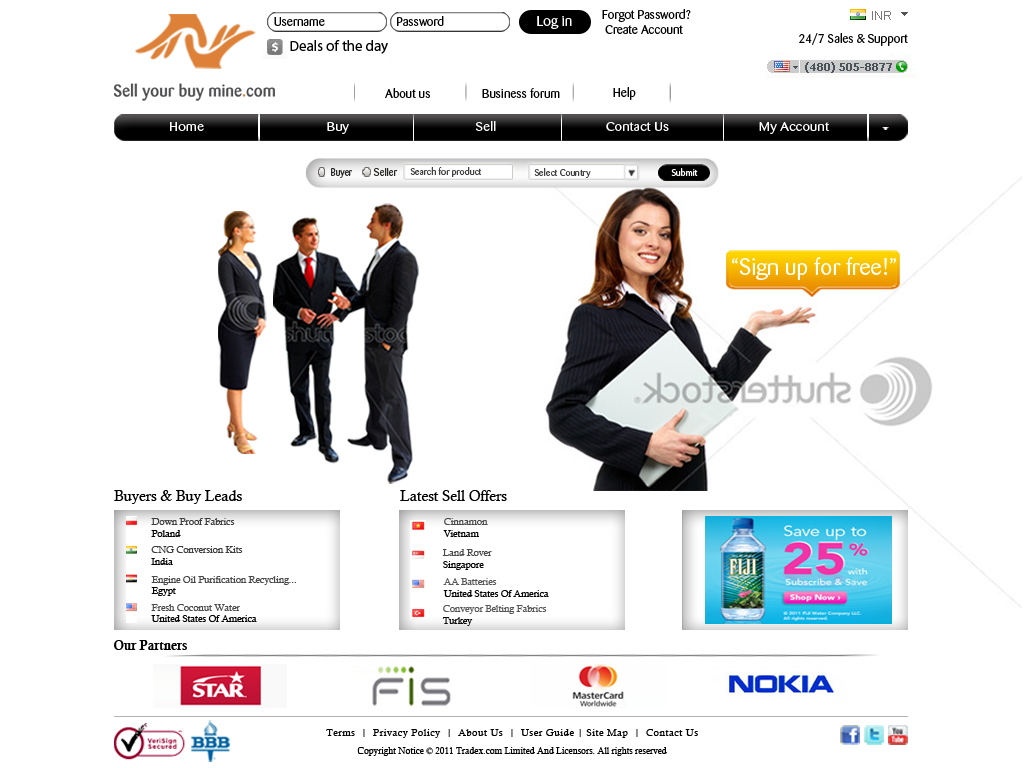
<style>
.page{position:relative;width:1024px;height:768px;background:#ffffff}
.page>*{position:absolute;margin:0}
.t1{font:12px "Barmeno-Regular";color:#000000;scale:1.05 1}
.t2{font:14px "Barmeno-Regular";color:#ffffff;scale:1.05 1}
.t3{font:14.9px "MyriadPro-Regular";color:#000000}
.t4{font:12px "Barmeno-Regular";color:#030303;scale:1.05 1}
.t5{font:12.1px "Barmeno-Regular";color:#ffffff;scale:1.2 1}
.t6{font:10.4px "Barmeno-Regular";color:#282826;scale:0.87 1}
.t7{font:10.4px "Barmeno-Regular";color:#282826}
.t8{font:9.5px "Barmeno-Regular";color:#414141}
.t9{font:10px "MyriadPro-Regular";color:#ffffff;scale:0.87 1}
.t10{font:23px "Barmeno-Regular";color:#ffffff}
.t11{font:14.8px "CalistoMT";color:#000000}
.t12{font:9.6px "CalistoMT";color:#3f3d3d}
.t13{font:9.6px "CalistoMT";color:#000000}
.t14{font:9.6px "CalistoMT";color:#4a4949}
.t15{font:9.6px "CalistoMT";color:#494848}
.t16{font:9.6px "CalistoMT";color:#565656}
.t17{font:9.6px "CalistoMT";color:#4c4b4b}
.t18{font:9.6px "CalistoMT";color:#070707}
.t19{font:13px "CalisMTBol";color:#000000}
.t20{font:10px/18px "CalistoMT";letter-spacing:0.045em;color:#000000}
.t21{font:9px/18px "CalistoMT";color:#000000}
</style>
<div class="page">
<p class="t1" style="left:274px;top:17px;width:51px;height:9px">Username</p>
<p class="t1" style="left:397px;top:16px;width:47px;height:10px">Password</p>
<p class="t2" style="left:537px;top:16px;width:35px;height:13px">Log in</p>
<p class="t1" style="left:602px;top:9px;width:89px;height:25px">Forgot Password? <br> Create Account</p>
<p class="t3" style="left:290px;top:40px;width:98px;height:14px">Deals of the day</p>
<p class="t4" style="left:799px;top:33px;width:109px;height:13px">24/7 Sales &amp; Support</p>
<p class="t1" style="left:385px;top:88px;width:45px;height:10px">About us</p>
<p class="t1" style="left:482px;top:88px;width:78px;height:10px">Business forum</p>
<p class="t1" style="left:613px;top:87px;width:23px;height:13px">Help</p>
<p class="t5" style="left:170px;top:121px;width:660px;height:13px">Home                                     Buy                                      Sell                                 Contact Us                           My Account</p>
<p class="t6" style="left:331px;top:168px;width:21px;height:10px">Buyer</p>
<p class="t7" style="left:373px;top:168px;width:25px;height:8px">Seller</p>
<p class="t8" style="left:410px;top:167px;width:72px;height:10px">Search for product</p>
<p class="t8" style="left:534px;top:168px;width:57px;height:10px">Select Country</p>
<p class="t9" style="left:671px;top:168px;width:27px;height:8px">Submit</p>
<p class="t10" style="left:732px;top:257px;width:164px;height:23px">“Sign up for free!”</p>
<p class="t11" style="left:114px;top:490px;width:393px;height:14px">Buyers &amp; Buy Leads                            Latest Sell Offers</p>
<p class="t12" style="left:151px;top:518px;width:84px;height:19px">Down Proof Fabrics<br><span class="t13">Poland</span></p>
<p class="t14" style="left:443px;top:518px;width:45px;height:19px">Cinnamon<br><span class="t13">Vietnam</span></p>
<p class="t12" style="left:151px;top:546px;width:92px;height:19px">CNG Conversion Kits<br><span class="t13">India</span></p>
<p class="t14" style="left:442px;top:549px;width:50px;height:21px">Land Rover<br><span class="t13">Singapore</span></p>
<p class="t15" style="left:151px;top:576px;width:145px;height:20px">Engine Oil Purification Recycling...<br><span class="t13">Egypt</span></p>
<p class="t13" style="left:443px;top:578px;width:106px;height:19px"><span class="t16">AA Batteries<br></span>United States Of America</p>
<p class="t13" style="left:151px;top:604px;width:106px;height:18px"><span class="t17">Fresh Coconut Water<br></span>United States Of America</p>
<p class="t16" style="left:442px;top:605px;width:105px;height:21px">Conveyor Belting Fabrics<br><span class="t18">Turkey</span></p>
<p class="t19" style="left:114px;top:640px;width:73px;height:10px">Our Partners</p>
<p class="t20" style="left:326px;top:729px;width:372px;height:27px;text-align:center">Terms  |  Privacy Policy  |  About Us  |  User Guide | Site Map  |  Contact Us<br><span class="t21">Copyright Notice © 2011 Tradex.com Limited And Licensors. All rights reserved</span></p>
</div>
